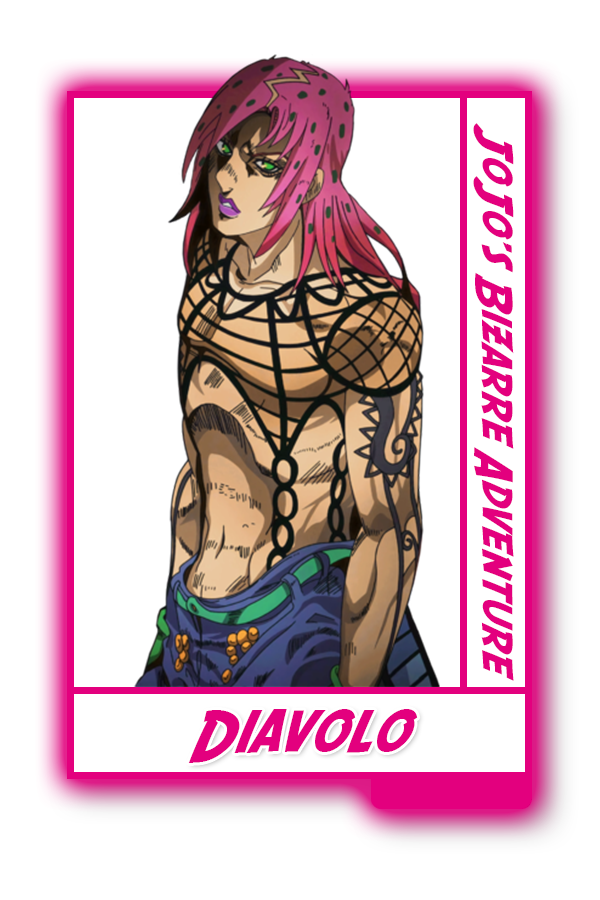
<style>
.page{position:relative;width:600px;height:900px;background:#ffffff}
.page>*{position:absolute;margin:0}
.t1{font:42.4px "SFFedora";color:#e3007e}
.t2{font:60.3px "SFFedora";color:#e3007e}
</style>
<div class="page">
<p class="t1" style="left:473px;top:123px;width:41px;height:558px;rotate:90deg">JoJo's Bizarre Adventure</p>
<p class="t2" style="left:188px;top:709px;width:230px;height:54px">Diavolo</p>
</div>
